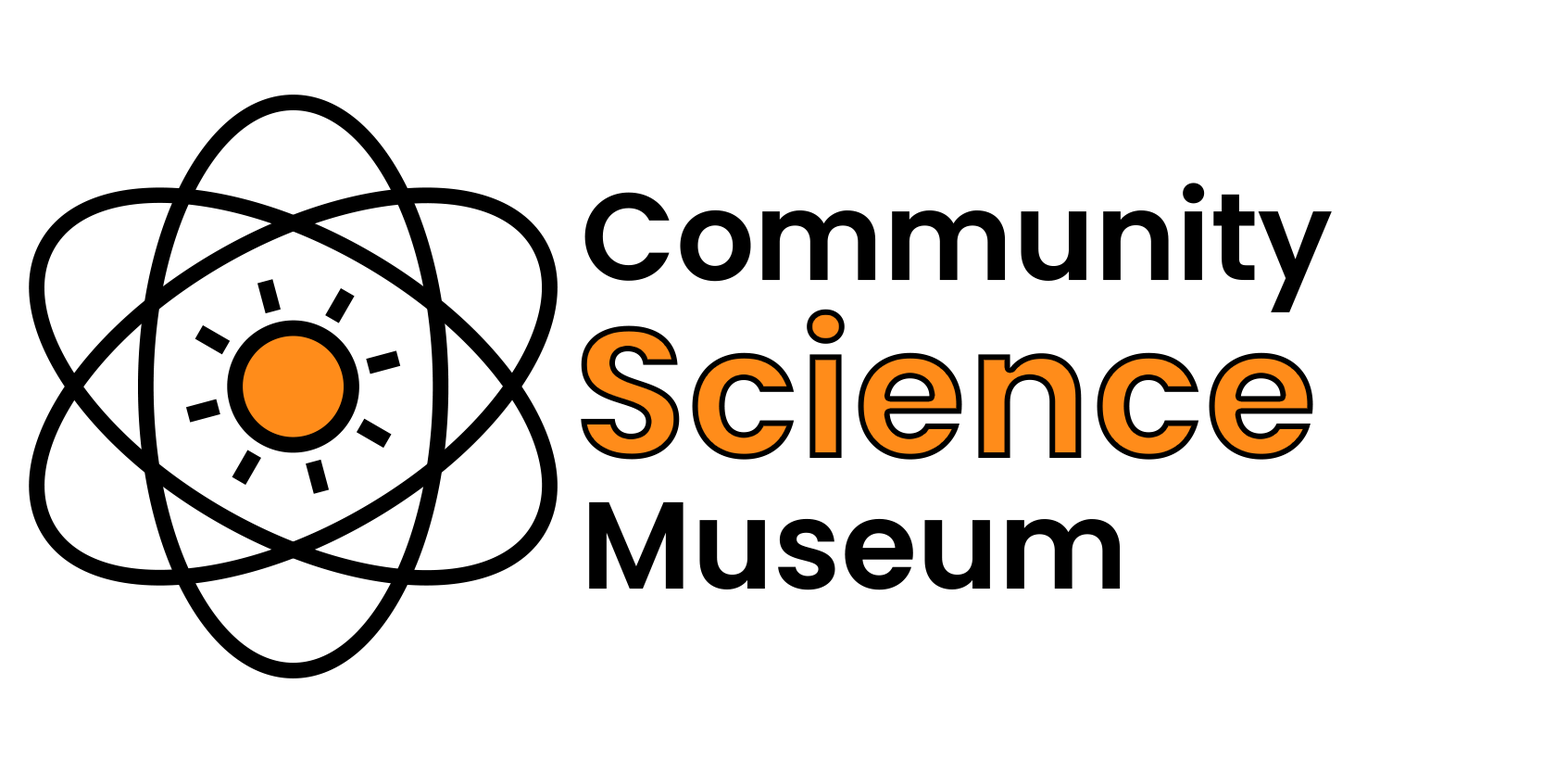
<style>
.page{position:relative;width:1543px;height:773px;background:#ffffff}
.page>*{position:absolute;margin:0}
.t1{font:123.5px/154.4px "Poppins-SemiBold";color:#000000}
.t2{font:185.3px "Poppins-Bold"}
</style>
<div class="page">
<p class="t1" style="left:585px;top:182px;width:747px;height:408px">Community<br><br>Museum</p>
<p class="t2" style="left:581px;top:308px;width:733px;height:151px">Science</p>
</div>
